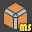
<style>
.page{position:relative;width:32px;height:32px;background:#444444}
.page>*{position:absolute;margin:0}
.t1{font:10px "Bauhaus93";color:#ffde67}
</style>
<div class="page">
<p class="t1" style="left:19px;top:24px;width:13px;height:7px">MS</p>
</div>
